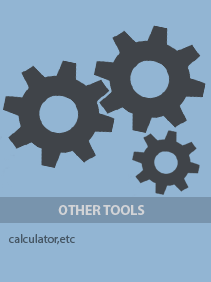
<style>
.page{position:relative;width:211px;height:282px;background:#92b5d3}
.page>*{position:absolute;margin:0}
.t1{font:14px "MyriadPro-Bold";color:#e0dddd}
.t2{font:12px "MyriadPro-Regular";color:#465765}
</style>
<div class="page">
<p class="t1" style="left:58px;top:205px;width:87px;height:10px;opacity:0.86">OTHER TOOLS</p>
<p class="t2" style="left:9px;top:234px;width:66px;height:11px">calculator,etc</p>
</div>
